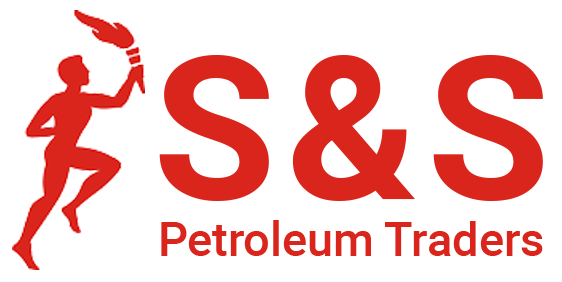
<style>
.page{position:relative;width:562px;height:282px;background:#ffffff}
.page>*{position:absolute;margin:0}
.t1{font:200px "Roboto-Bold";letter-spacing:-0.1em;color:#da251d}
.t2{font:46.8px "Roboto-Medium";color:#da251d}
</style>
<div class="page">
<p class="t1" style="left:159px;top:55px;width:384px;height:146px">S &amp; S</p>
<p class="t2" style="left:161px;top:220px;width:382px;height:36px">Petroleum Traders</p>
</div>
